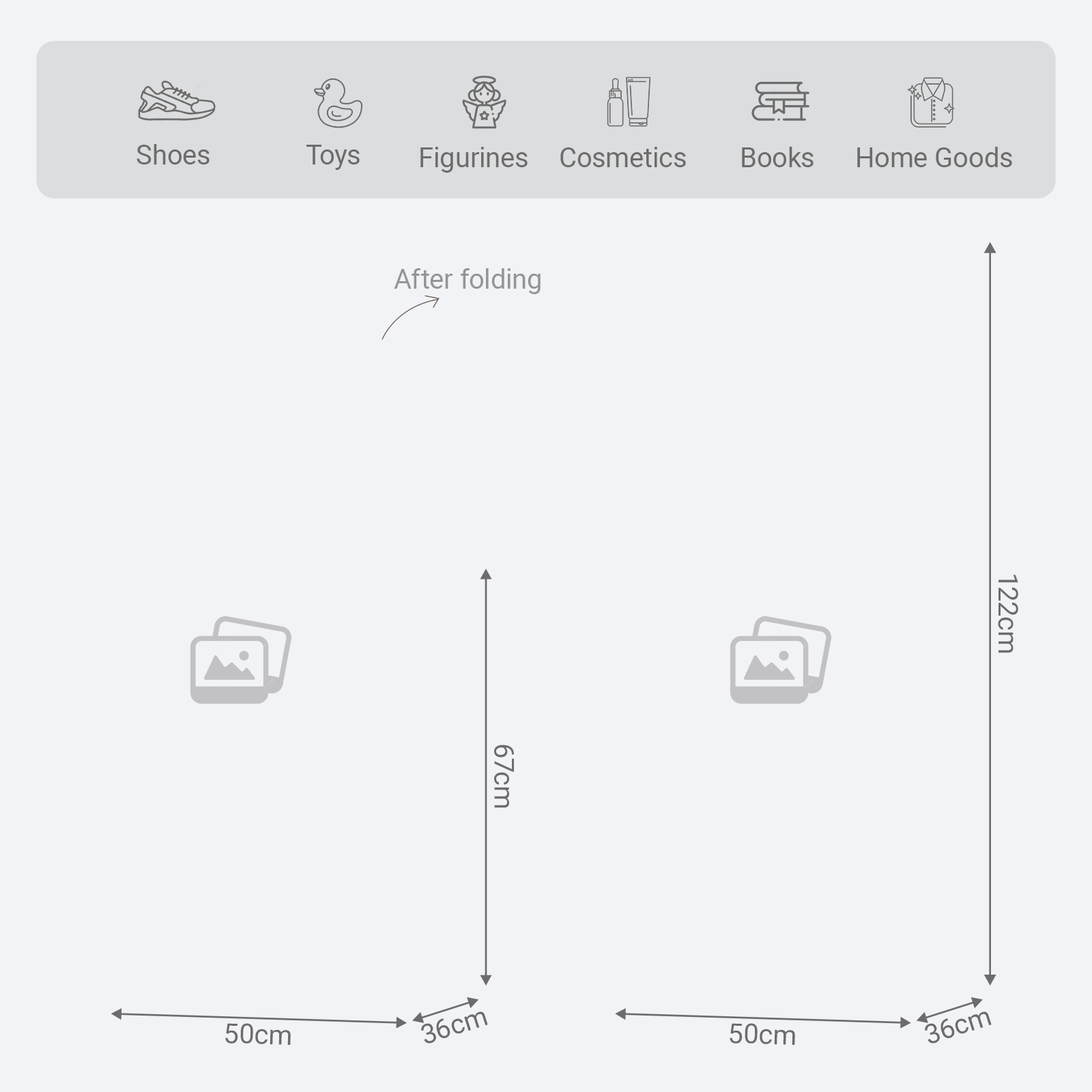
<style>
.page{position:relative;width:1092px;height:1092px;background:#f2f3f6}
.page>*{position:absolute;margin:0}
.t1{font:27.3px "Roboto-Regular";color:#6c6c6c}
.t2{font:27.3px "Roboto-Regular";color:#949596}
</style>
<div class="page">
<p class="t1" style="left:136px;top:144px;width:74px;height:20px">Shoes</p>
<p class="t1" style="left:306px;top:145px;width:54px;height:25px">Toys</p>
<p class="t1" style="left:420px;top:147px;width:108px;height:26px">Figurines</p>
<p class="t1" style="left:560px;top:147px;width:126px;height:20px">Cosmetics</p>
<p class="t1" style="left:742px;top:147px;width:72px;height:20px">Books</p>
<p class="t1" style="left:857px;top:147px;width:155px;height:20px">Home Goods</p>
<p class="t2" style="left:394px;top:268px;width:147px;height:26px">After folding</p>
<p class="t1" style="left:998px;top:575px;width:20px;height:78px;rotate:90deg">122cm</p>
<p class="t1" style="left:494px;top:745px;width:20px;height:63px;rotate:90deg">67cm</p>
<p class="t1" style="left:421px;top:1011px;width:67px;height:33px;rotate:-18deg">36cm</p>
<p class="t1" style="left:925px;top:1011px;width:67px;height:33px;rotate:-18deg">36cm</p>
<p class="t1" style="left:225px;top:1023px;width:66px;height:22px;rotate:2deg">50cm</p>
<p class="t1" style="left:730px;top:1023px;width:65px;height:22px;rotate:2deg">50cm</p>
</div>
